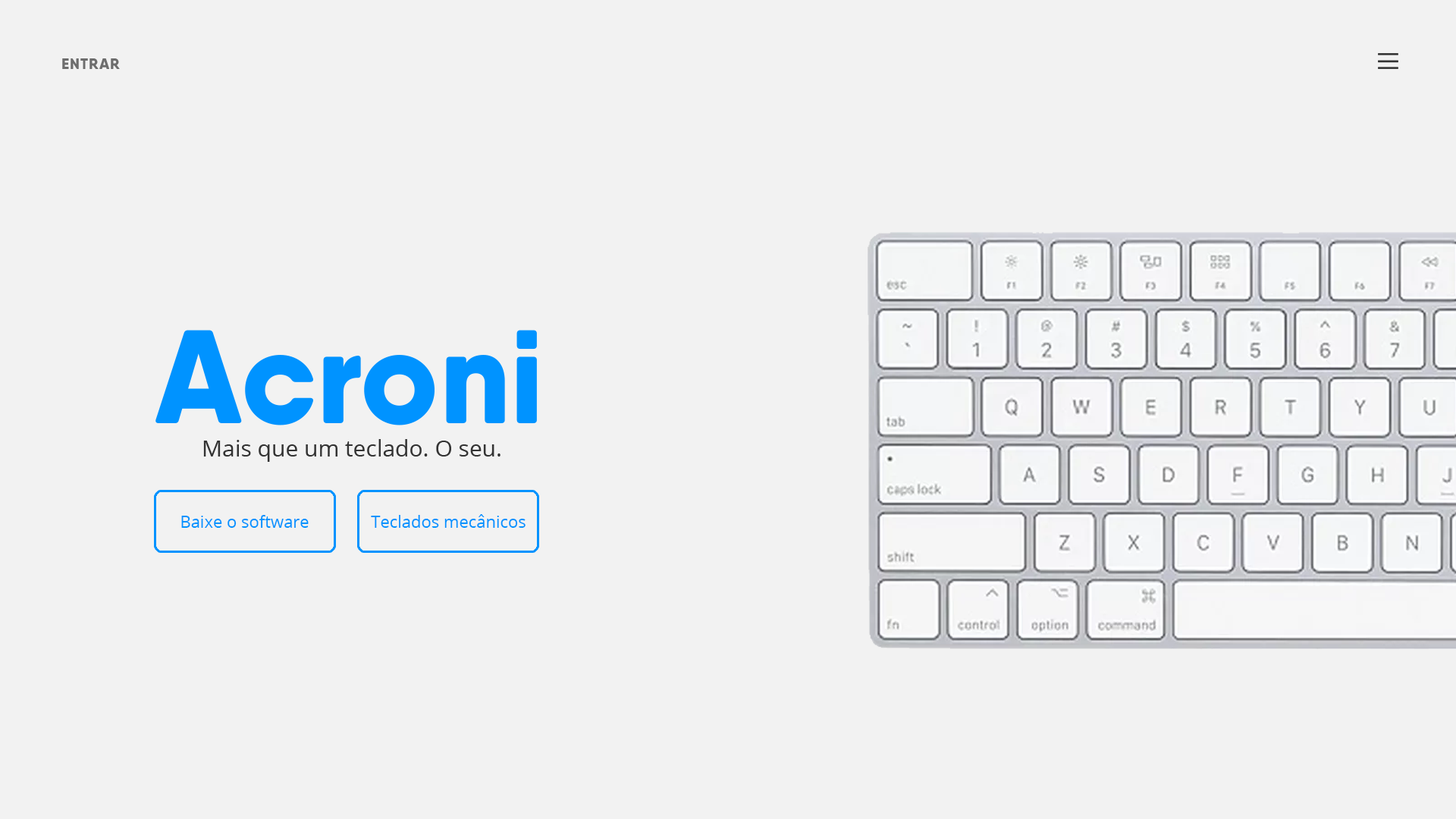
<style>
.page{position:relative;width:1456px;height:819px;background:#f2f2f2}
.page>*{position:absolute;margin:0}
.t1{font:15.2px "QanelasSoftDEMO-ExtraBold";letter-spacing:0.05em;color:#6d6d6d}
.t2{font:132.7px "QanelasSoftDEMO-ExtraBold";color:#0093ff}
.t3{font:22.7px "OpenSans-Regular";color:#333333}
.t4{font:16.7px "OpenSans-Regular";color:#0093ff}
</style>
<div class="page">
<p class="t1" style="left:62px;top:58px;width:58px;height:11px">ENTRAR</p>
<p class="t2" style="left:155px;top:330px;width:382px;height:95px">Acroni</p>
<p class="t3" style="left:203px;top:439px;width:297px;height:23px">Mais que um teclado. O seu.</p>
<p class="t4" style="left:181px;top:515px;width:128px;height:13px">Baixe o software</p>
<p class="t4" style="left:371px;top:514px;width:155px;height:14px">Teclados mecânicos</p>
</div>
